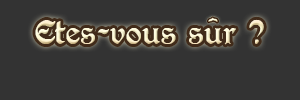
<style>
.page{position:relative;width:300px;height:100px;background:#333333}
.page>*{position:absolute;margin:0}
.t1{font:24px "PerryGothic";color:#fcf1cf}
</style>
<div class="page">
<p class="t1" style="left:35px;top:19px;width:229px;height:26px">Etes-vous sur ?</p>
</div>
